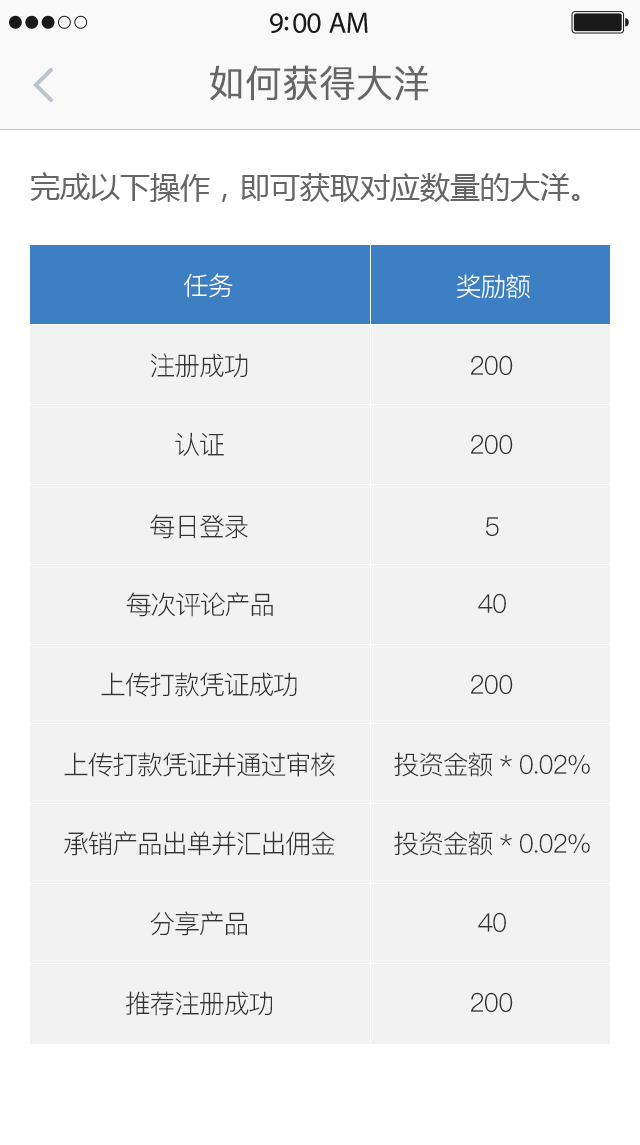
<style>
.page{position:relative;width:640px;height:1145px;background:#f2f2f2}
.page>*{position:absolute;margin:0}
.t1{font:37.1px "PingFang-SC-Regular";color:#666666;font-weight:bold}
.t2{font:30px "MicrosoftYaHei";color:#666666}
.t3{font:26px "PingFang-SC-Regular";letter-spacing:-0.05em;color:#ffffff}
.t4{font:26px "PingFang-SC-Regular";letter-spacing:-0.05em;color:#333333}
</style>
<div class="page">
<p class="t1" style="left:210px;top:65px;width:219px;height:36px">如何获得大洋</p>
<p class="t2" style="left:30px;top:172px;width:550px;height:30px">完成以下操作，即可获取对应数量的大洋。</p>
<p class="t3" style="left:184px;top:273px;width:49px;height:25px">任务</p>
<p class="t3" style="left:457px;top:274px;width:73px;height:25px">奖励额</p>
<p class="t4" style="left:150px;top:353px;width:98px;height:25px">注册成功</p>
<p class="t4" style="left:471px;top:355px;width:42px;height:20px">200</p>
<p class="t4" style="left:175px;top:432px;width:49px;height:24px">认证</p>
<p class="t4" style="left:471px;top:434px;width:42px;height:20px">200</p>
<p class="t4" style="left:150px;top:514px;width:98px;height:25px">每日登录</p>
<p class="t4" style="left:486px;top:517px;width:13px;height:19px">5</p>
<p class="t4" style="left:126px;top:592px;width:147px;height:25px">每次评论产品</p>
<p class="t4" style="left:478px;top:593px;width:28px;height:20px">40</p>
<p class="t4" style="left:101px;top:672px;width:196px;height:25px">上传打款凭证成功</p>
<p class="t4" style="left:471px;top:674px;width:42px;height:20px">200</p>
<p class="t4" style="left:64px;top:752px;width:271px;height:25px">上传打款凭证并通过审核</p>
<p class="t4" style="left:394px;top:752px;width:196px;height:25px">投资金额 * 0.02%</p>
<p class="t4" style="left:64px;top:831px;width:271px;height:25px">承销产品出单并汇出佣金</p>
<p class="t4" style="left:394px;top:831px;width:196px;height:25px">投资金额 * 0.02%</p>
<p class="t4" style="left:150px;top:911px;width:97px;height:25px">分享产品</p>
<p class="t4" style="left:478px;top:912px;width:28px;height:20px">40</p>
<p class="t4" style="left:126px;top:991px;width:146px;height:25px">推荐注册成功</p>
<p class="t4" style="left:471px;top:992px;width:42px;height:20px">200</p>
</div>
